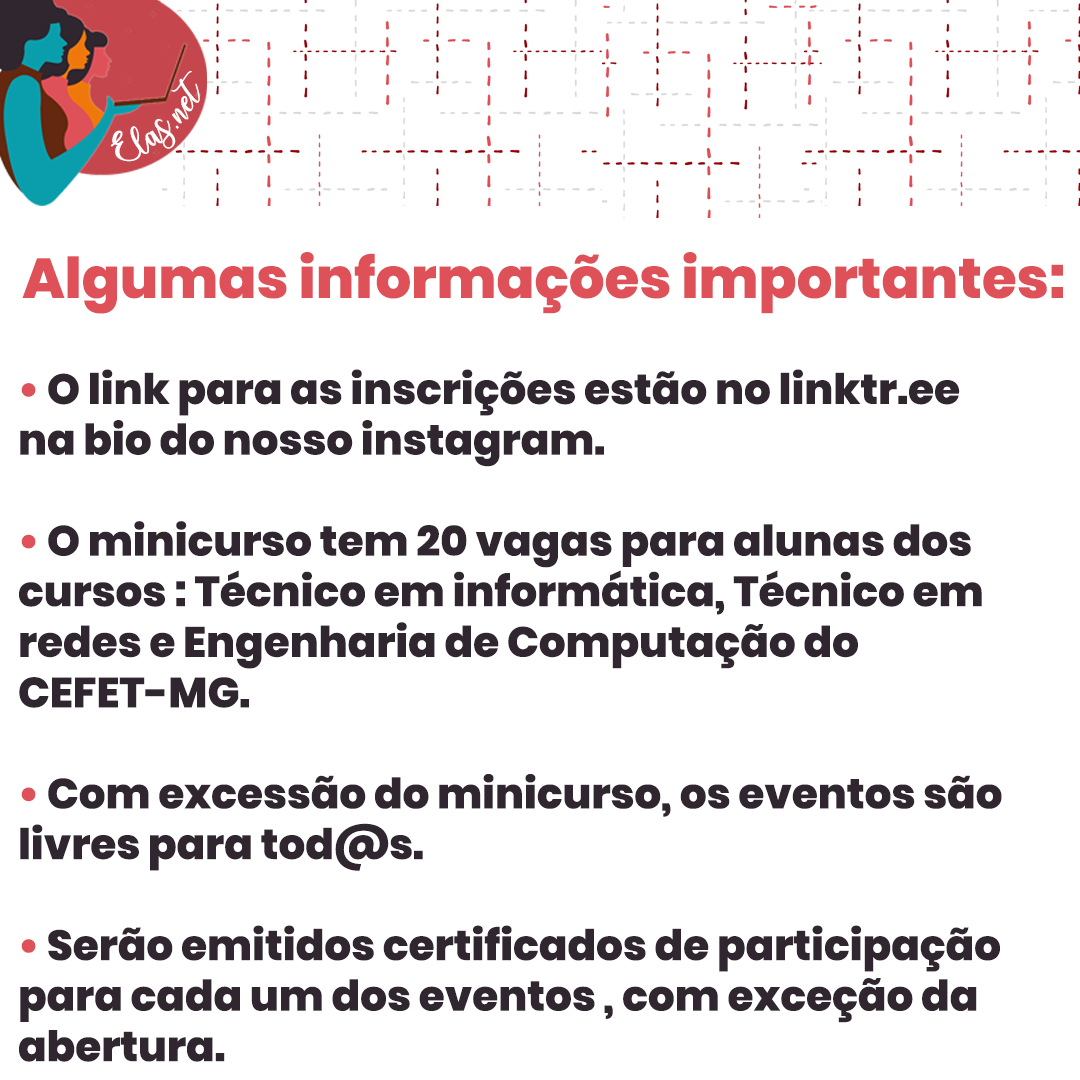
<style>
.page{position:relative;width:1080px;height:1080px;background:#ffffff}
.page>*{position:absolute;margin:0}
.t1{font:25.7px "charlinda-Regular";color:#ffffff;scale:1.18 1}
.t2{font:56.1px "Poppins-ExtraBold";color:#df5158}
.t3{font:42.1px "Poppins-ExtraBold";color:#2f262f}
.t4{font:42.1px "Poppins-ExtraBold";color:#df5158}
</style>
<div class="page">
<p class="t1" style="left:110px;top:71px;width:90px;height:91px;rotate:-43deg">Elas.net</p>
<p class="t2" style="left:22px;top:252px;width:1041px;height:62px">Algumas informações importantes:</p>
<p class="t3" style="left:19px;top:369px;width:983px;height:693px"><span class="t4">• </span>O link para as inscrições estão no linktr.ee <br>na bio do nosso instagram.<br><br><span class="t4">• </span>O minicurso tem 20 vagas para alunas dos <br>cursos : Técnico em informática, Técnico em <br>redes e Engenharia de Computação do <br>CEFET-MG.<br><br><span class="t4">• </span>Com excessão do minicurso, os eventos são <br>livres para tod@s.<br><br><span class="t4">•</span> Serão emitidos certificados de participação <br>para cada um dos eventos , com exceção da <br>abertura.</p>
</div>
